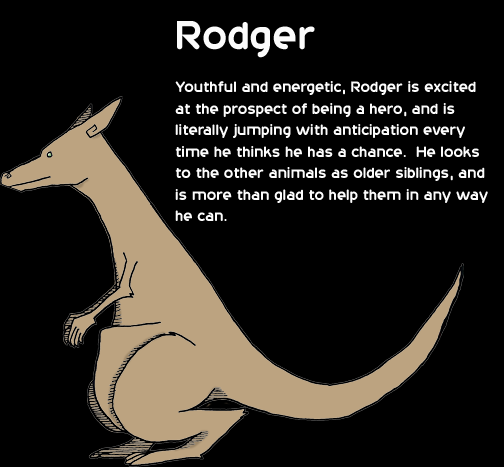
<style>
.page{position:relative;width:504px;height:467px;background:#000000}
.page>*{position:absolute;margin:0}
.t1{font:17.9px "20thCenturyFont";color:#fcfcfc}
.t2{font:47.8px "20thCenturyFont";color:#fcfcfc}
</style>
<div class="page">
<p class="t1" style="left:175px;top:21px;width:313px;height:200px"><span class="t2">Rodger<br></span><br>Youthful and energetic, Rodger is excited <br>at the prospect of being a hero, and is <br>literally jumping with anticipation every <br>time he thinks he has a chance.  He looks <br>to the other animals as older siblings, and <br>is more than glad to help them in any way <br>he can.</p>
</div>
